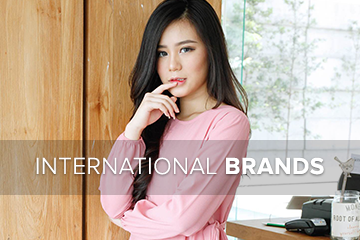
<style>
.page{position:relative;width:360px;height:240px}
.page>*{position:absolute;margin:0}
.t1{font:24px "ProximaNovaLight";letter-spacing:0.024em;color:#ffffff}
.t2{font:24px "ProximaNova-Bold";letter-spacing:0.024em;color:#ffffff}
</style>
<div class="page">
<p class="t1" style="left:36px;top:157px;width:288px;height:18px">INTERNATIONAL <span class="t2">BRANDS</span></p>
</div>
